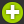
<style>
.page{position:relative;width:24px;height:24px;background:#333333}
.page>*{position:absolute;margin:0}
.t1{font:25.7px "Arial-BoldMT";letter-spacing:-0.04em;color:#ffffff}
</style>
<div class="page">
<p class="t1" style="left:6px;top:5px;width:14px;height:14px">+</p>
</div>
